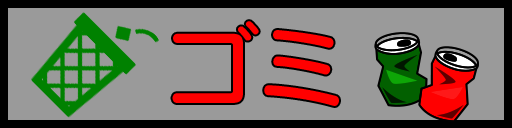
<style>
.page{position:relative;width:512px;height:128px;background:#9a9a9a}
.page>*{position:absolute;margin:0}
.t1{font:91.7px "SeuratProN-DB";color:#ff0000}
</style>
<div class="page">
<p class="t1" style="left:172px;top:21px;width:167px;height:85px">ゴミ</p>
</div>
